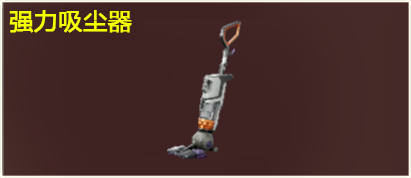
<style>
.page{position:relative;width:411px;height:178px}
.page>*{position:absolute;margin:0}
.t1{font:24px "MicrosoftYaHeiUI";color:#f4ff00;font-weight:bold}
</style>
<div class="page">
<p class="t1" style="left:9px;top:10px;width:123px;height:23px">强力吸尘器</p>
</div>
